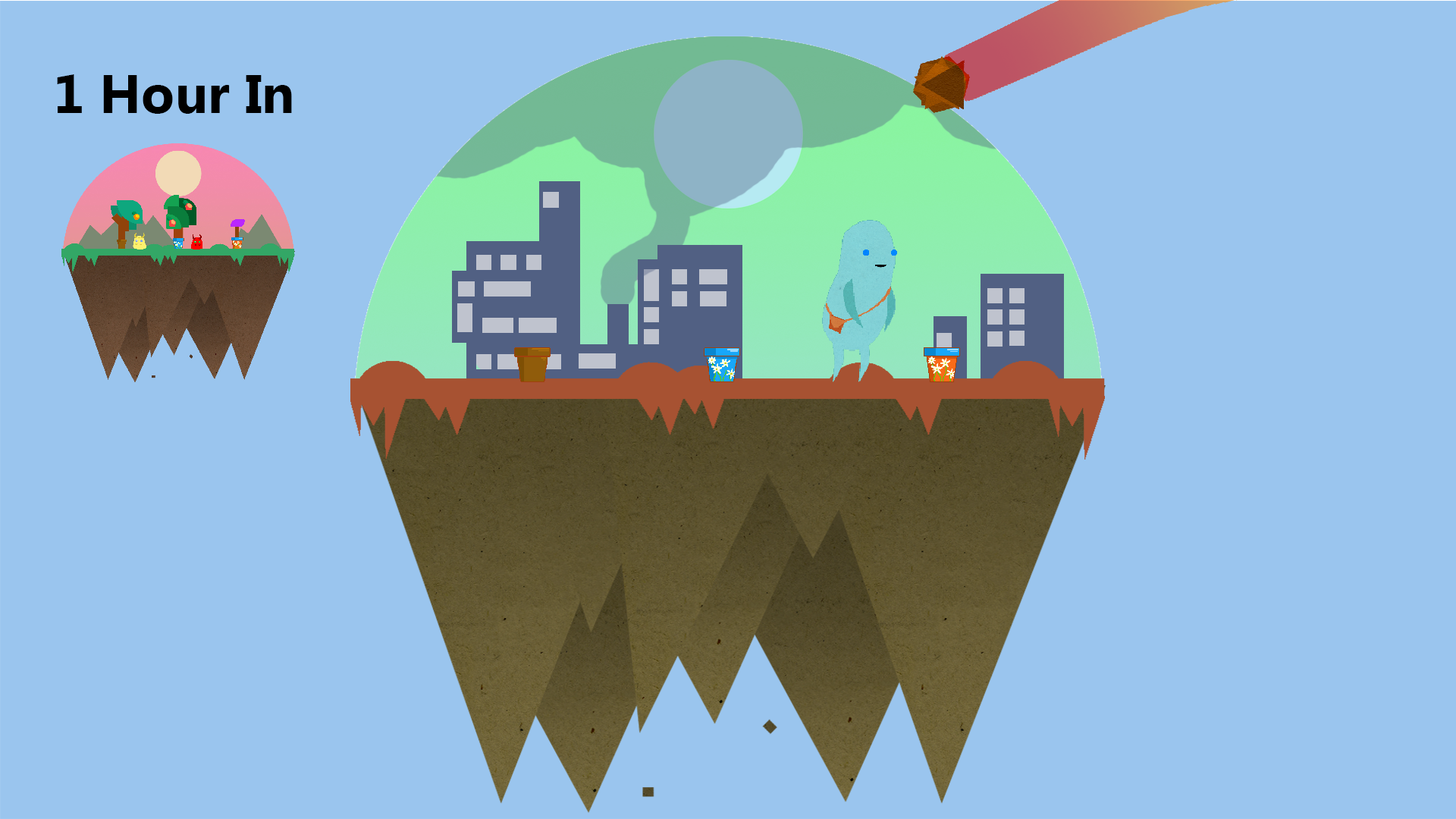
<style>
.page{position:relative;width:1456px;height:819px;background:#9ac5ee}
.page>*{position:absolute;margin:0}
.t1{font:54.6px "MyanmarText-Bold";color:#000000}
</style>
<div class="page">
<p class="t1" style="left:57px;top:74px;width:235px;height:40px">1 Hour In</p>
</div>
